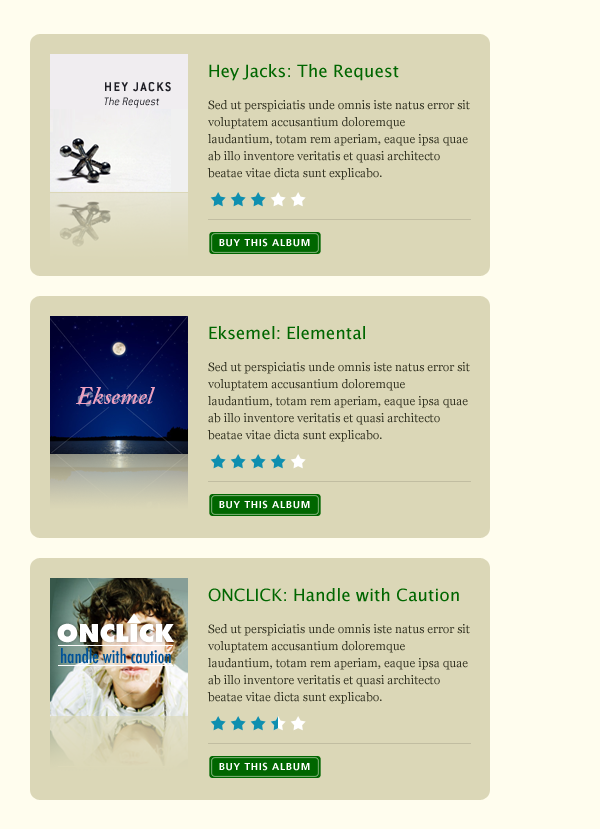
<style>
.page{position:relative;width:600px;height:829px;background:#dbd7b7}
.page>*{position:absolute;margin:0}
.t1{font:12px/17px "Georgia";color:#333322}
.t2{font:17px/16px "LucidaGrande";color:#006600}
.t3{font:12px/32px "Georgia";color:#333322}
.t4{font:14px "ConduitITC-Bold";letter-spacing:0.1em;color:#1f1f26;text-transform:uppercase}
.t5{font:12px "ConduitITC-LightItalic"}
.t6{font:10px "Frutiger-Bold";letter-spacing:0.075em;color:#ffffff;text-transform:uppercase}
.t7{font:24px "ACaslon-SemiboldItalic";color:#eda0bf}
.t8{font:24px "Futura-ExtraBold";color:#ffffff;text-transform:uppercase}
.t9{font:18px "Futura-CondensedMedium";color:#005298}
</style>
<div class="page">
<p class="t1" style="left:207px;top:64px;width:263px;height:116px"><span class="t2">Hey Jacks: The Request<br></span><span class="t3">Sed ut perspiciatis unde omnis iste natus error sit </span>voluptatem accusantium doloremque laudantium, totam rem aperiam, eaque ipsa quae ab illo inventore veritatis et quasi architecto beatae vitae dicta sunt explicabo.</p>
<p class="t4" style="left:105px;top:82px;width:66px;height:10px">Hey Jacks</p>
<p class="t5" style="left:104px;top:97px;width:56px;height:11px">The Request</p>
<p class="t6" style="left:219px;top:238px;width:91px;height:9px">Buy this album</p>
<p class="t1" style="left:207px;top:326px;width:263px;height:116px"><span class="t2">Eksemel: Elemental<br></span><span class="t3">Sed ut perspiciatis unde omnis iste natus error sit </span>voluptatem accusantium doloremque laudantium, totam rem aperiam, eaque ipsa quae ab illo inventore veritatis et quasi architecto beatae vitae dicta sunt explicabo.</p>
<p class="t7" style="left:76px;top:387px;width:79px;height:17px">Eksemel</p>
<p class="t6" style="left:219px;top:500px;width:91px;height:9px">Buy this album</p>
<p class="t1" style="left:207px;top:588px;width:263px;height:116px"><span class="t2">ONCLICK: Handle with Caution<br></span><span class="t3">Sed ut perspiciatis unde omnis iste natus error sit </span>voluptatem accusantium doloremque laudantium, totam rem aperiam, eaque ipsa quae ab illo inventore veritatis et quasi architecto beatae vitae dicta sunt explicabo.</p>
<p class="t8" style="left:57px;top:623px;width:118px;height:20px">onclIck</p>
<p class="t9" style="left:61px;top:648px;width:110px;height:16px">handle with caution</p>
<p class="t6" style="left:219px;top:762px;width:91px;height:9px">Buy this album</p>
</div>
